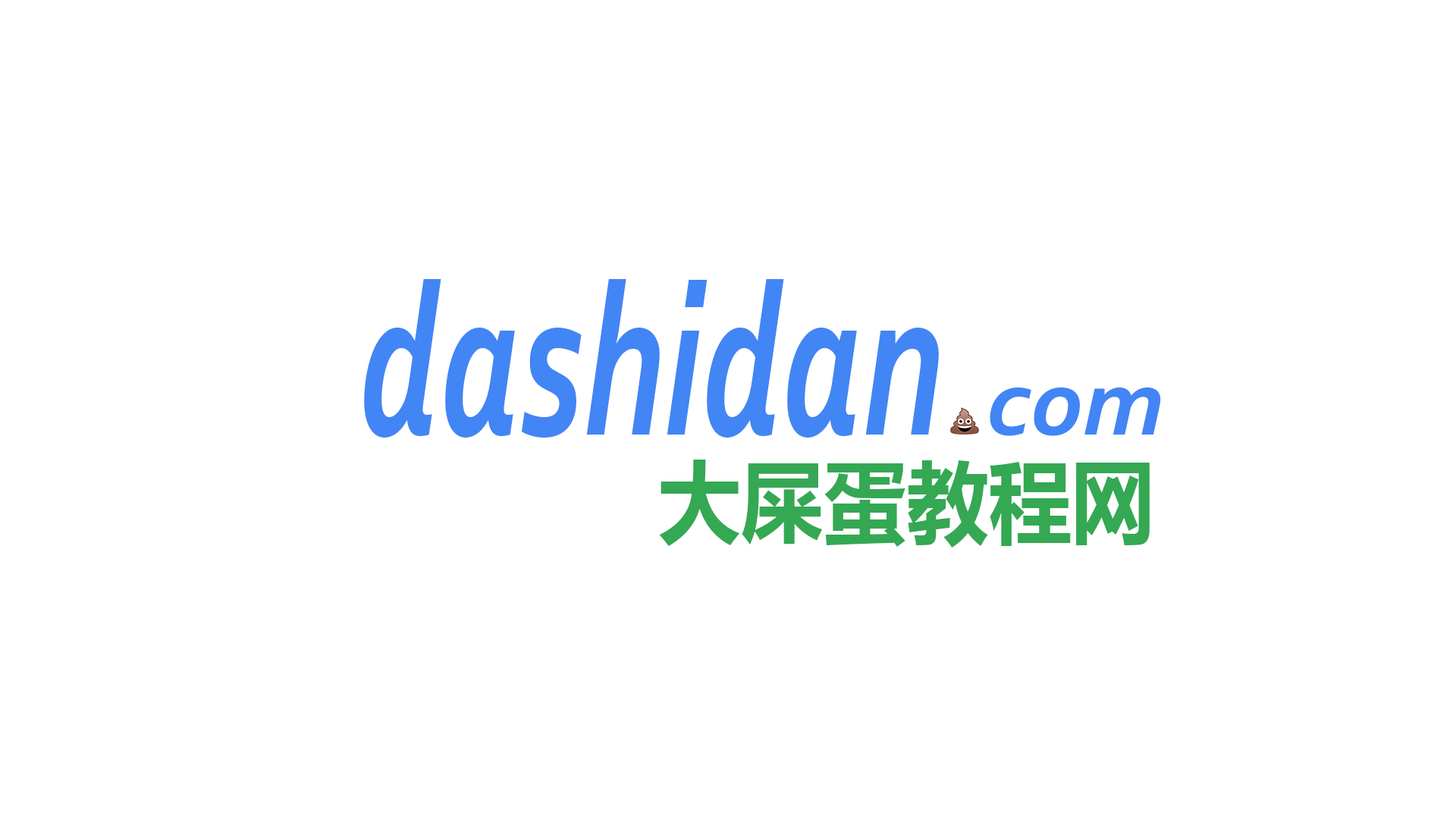
<style>
.page{position:relative;width:1456px;height:819px;background:#ffffff}
.page>*{position:absolute;margin:0}
.t1{font:219.8px "Corbel-BoldItalic";color:#4285f4;scale:0.68 1}
.t2{font:96.7px "Corbel-BoldItalic";color:#4285f4;scale:1.05 1}
.t3{font:89.2px "MicrosoftYaHei-Bold";color:#34a853;scale:0.93 1}
</style>
<div class="page">
<p class="t1" style="left:364px;top:279px;width:575px;height:159px">dashidan</p>
<p class="t2" style="left:990px;top:387px;width:171px;height:49px">com</p>
<p class="t3" style="left:659px;top:460px;width:491px;height:88px">大屎蛋教程网</p>
</div>
